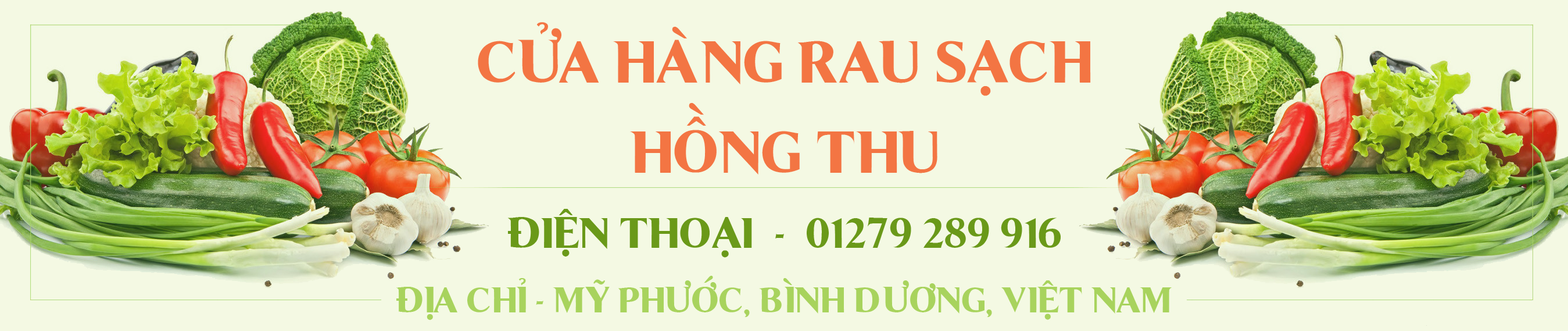
<style>
.page{position:relative;width:1568px;height:331px;background:#f4f9e3}
.page>*{position:absolute;margin:0}
.t1{font:58.1px "Coke4U";color:#f37543}
.t2{font:41.8px "Coke4U";color:#6a9919}
.t3{font:34.9px "Coke4U";color:#a8d35d}
</style>
<div class="page">
<p class="t1" style="left:478px;top:22px;width:613px;height:74px">CỬA HÀNG RAU SẠCH</p>
<p class="t1" style="left:630px;top:103px;width:307px;height:71px">HỒNG THU</p>
<p class="t2" style="left:508px;top:209px;width:553px;height:48px">ĐIỆN THOẠI  -  01279 289 916</p>
<p class="t3" style="left:396px;top:275px;width:776px;height:45px">ĐỊA CHỈ - MỸ PHƯỚC, BÌNH DƯƠNG, VIỆT NAM</p>
</div>
